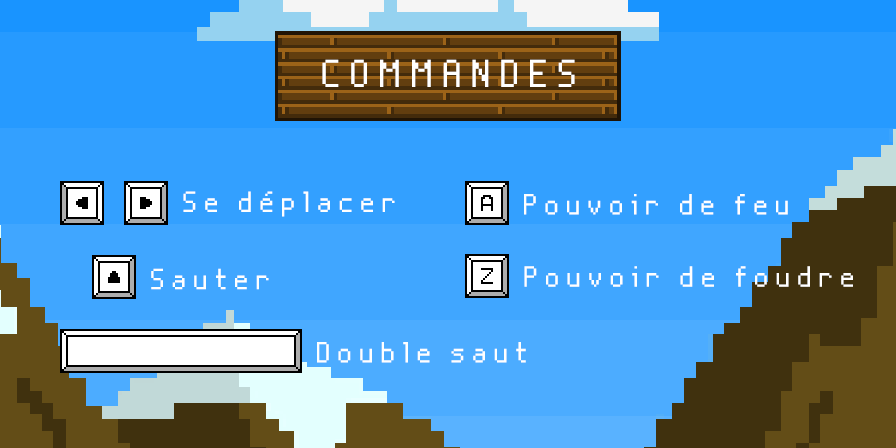
<style>
.page{position:relative;width:896px;height:448px}
.page>*{position:absolute;margin:0}
.t1{font:48.5px "Nine-By-Five-NBP";letter-spacing:0.2em;color:#ffffff;scale:1.03 1}
.t2{font:36.4px "Nine-By-Five-NBP";letter-spacing:0.2em;color:#ffffff;scale:1.03 1}
</style>
<div class="page">
<p class="t1" style="left:322px;top:59px;width:253px;height:28px">COMMANDES</p>
<p class="t2" style="left:183px;top:191px;width:212px;height:26px">Se déplacer</p>
<p class="t2" style="left:524px;top:194px;width:264px;height:21px">Pouvoir de feu</p>
<p class="t2" style="left:151px;top:268px;width:118px;height:22px">Sauter</p>
<p class="t2" style="left:524px;top:266px;width:329px;height:21px">Pouvoir de foudre</p>
<p class="t2" style="left:317px;top:342px;width:209px;height:21px">Double saut</p>
</div>
